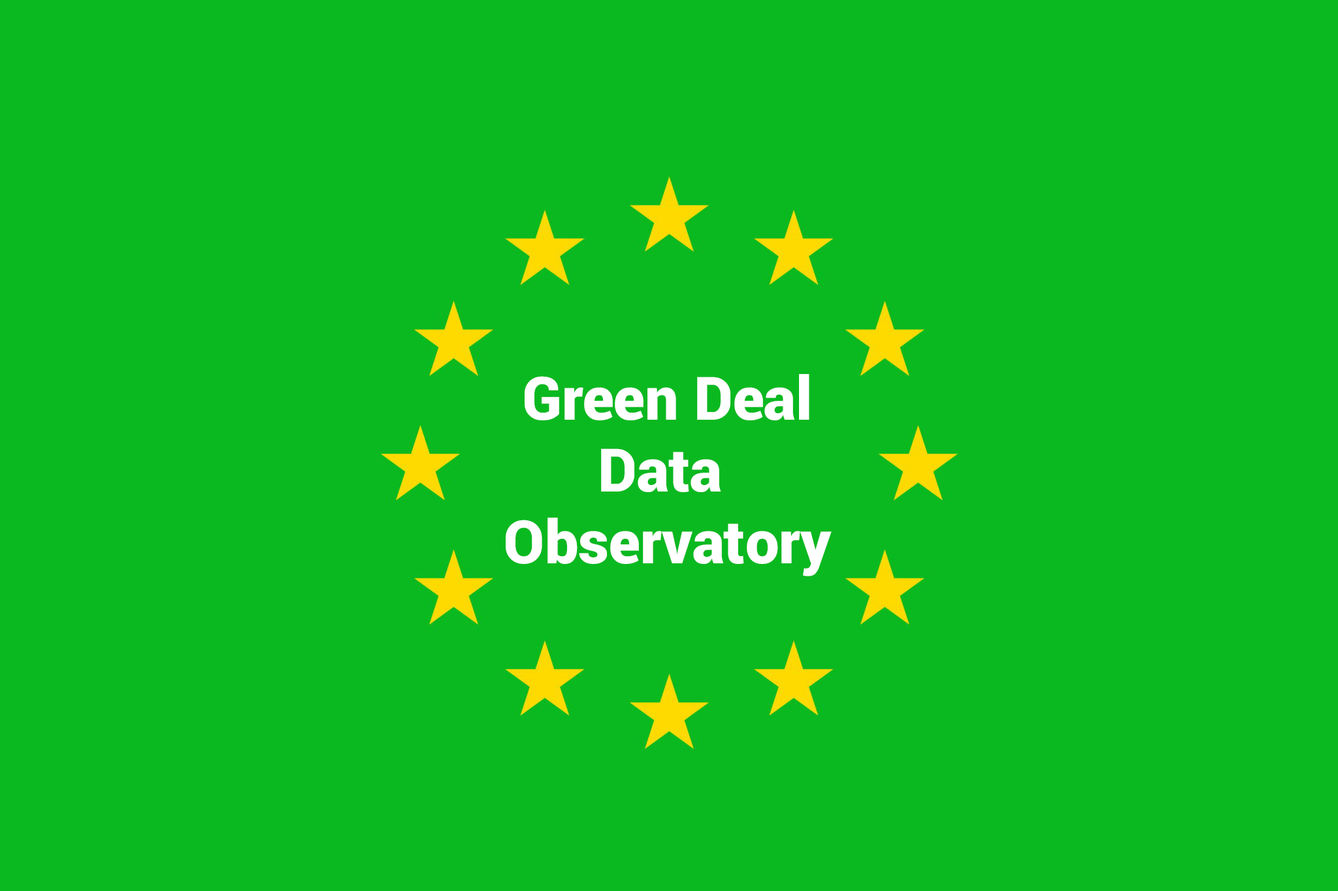
<style>
.page{position:relative;width:1338px;height:891px;background:#0ab920}
.page>*{position:absolute;margin:0}
.t1{font:59.9px "Roboto-Black";color:#ffffff}
</style>
<div class="page">
<p class="t1" style="left:506px;top:374px;width:325px;height:203px;text-align:center">Green Deal<br>Data <br>Observatory</p>
</div>
